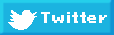
<style>
.page{position:relative;width:114px;height:35px;background:#1bb3e0}
.page>*{position:absolute;margin:0}
.t1{font:14.2px "PixeloidSans-Bold";color:#ffffff}
.t2{font:30px "NewgroundsFontRegular";color:#1bb3e0}
</style>
<div class="page">
<p class="t1" style="left:41px;top:12px;width:66px;height:11px">Twitter</p>
<p class="t1" style="left:41px;top:12px;width:66px;height:11px">Twitter</p>
<p class="t2" style="left:77px;top:9px;width:13px;height:22px">G</p>
</div>
